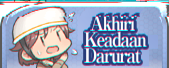
<style>
.page{position:relative;width:169px;height:68px}
.page>*{position:absolute;margin:0}
.t1{font:20px/16px "RyuminPro-ExBold";letter-spacing:-0.1em;color:#ffffff;scale:0.9 1}
</style>
<div class="page">
<p class="t1" style="left:84px;top:15px;width:63px;height:48px;opacity:0.8">Akhiri<br>Keadaan<br>Darurat</p>
<p class="t1" style="left:84px;top:15px;width:63px;height:48px;opacity:0.8">Akhiri<br>Keadaan<br>Darurat</p>
</div>
